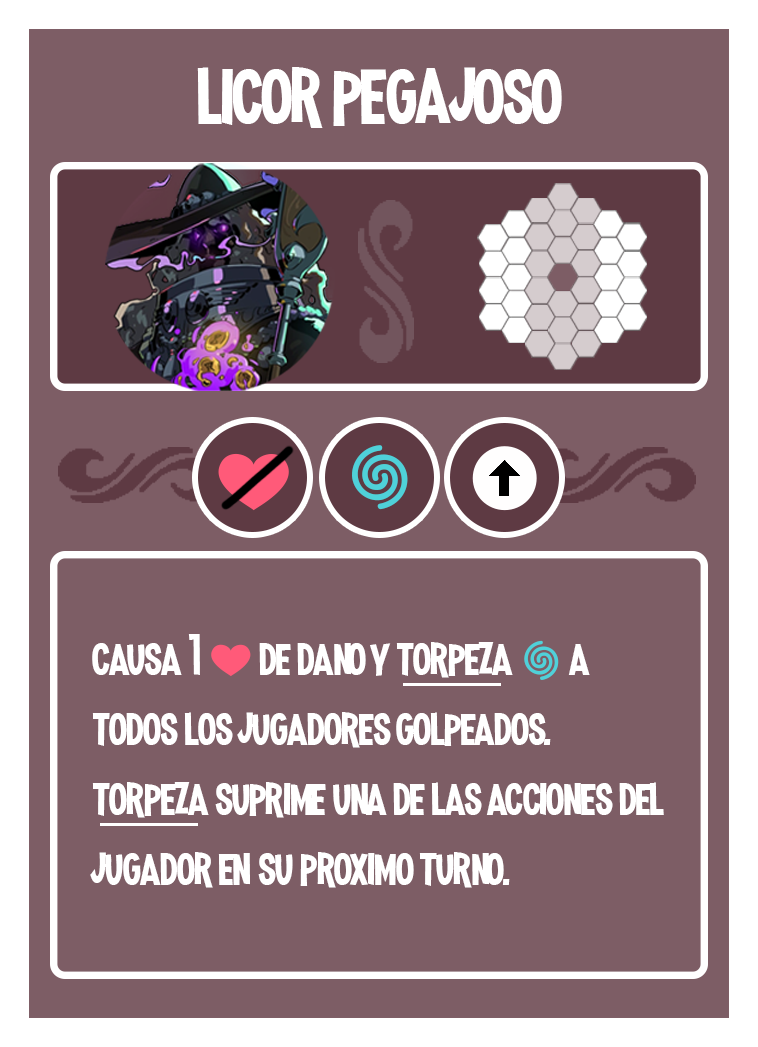
<style>
.page{position:relative;width:758px;height:1047px;background:#7d5d65}
.page>*{position:absolute;margin:0}
.t1{font:100px "MadnessHyperactive";color:#ffffff}
.t2{font:58.3px "MadnessHyperactive";color:#ffffff}
.t3{font:41.7px "EmojiOneColor";color:#ffffff}
</style>
<div class="page">
<p class="t1" style="left:197px;top:67px;width:365px;height:61px">licor pegajoso</p>
<p class="t1" style="left:197px;top:67px;width:365px;height:61px">licor pegajoso</p>
<p class="t2" style="left:90px;top:634px;width:574px;height:254px">causa 1 <span class="t3">❤️ </span>de dano y torpeza <span class="t3">🌀</span> a todos los jugadores golpeados.<br>torpeza suprime una de las acciones del jugador en su proximo turno.</p>
</div>
